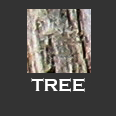
<style>
.page{position:relative;width:116px;height:116px;background:#333333}
.page>*{position:absolute;margin:0}
.t1{font:18px "CopperplateGothic-Bold";color:#ffffff}
</style>
<div class="page">
<p class="t1" style="left:31px;top:78px;width:54px;height:14px">TREE</p>
</div>
